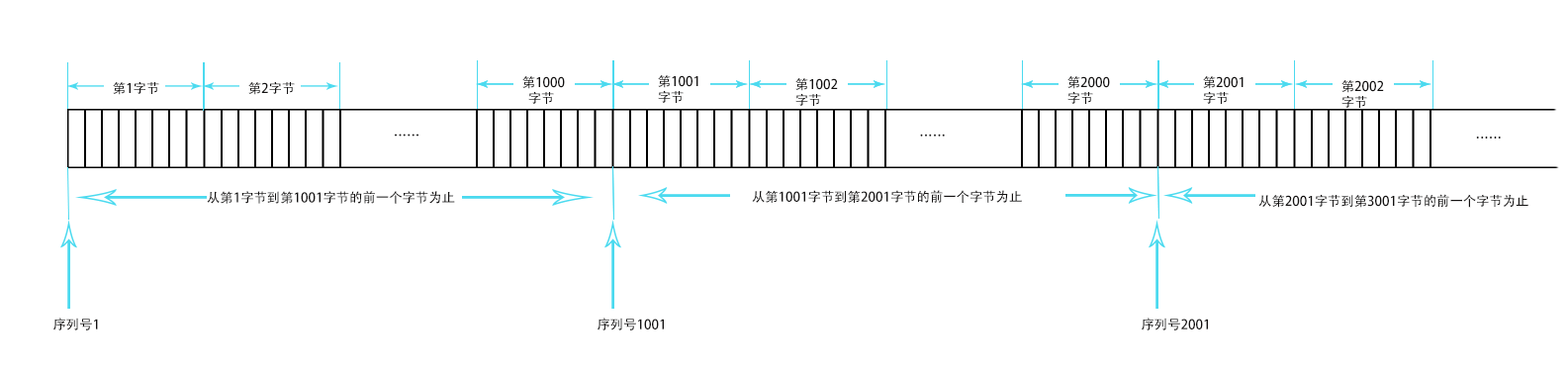
<style>
.page{position:relative;width:1568px;height:373px;background:#ffffff}
.page>*{position:absolute;margin:0}
.t1{font:13.2px "AdobeHeitiStd-Regular";color:#141212}
</style>
<div class="page">
<p class="t1" style="left:522px;top:76px;width:43px;height:28px">第1000<br>  字节</p>
<p class="t1" style="left:658px;top:75px;width:40px;height:28px">第1001<br>字节</p>
<p class="t1" style="left:1067px;top:76px;width:43px;height:28px">第2000<br>字节</p>
<p class="t1" style="left:1203px;top:76px;width:41px;height:28px">第2001<br>字节</p>
<p class="t1" style="left:113px;top:81px;width:46px;height:14px">第1字节</p>
<p class="t1" style="left:248px;top:81px;width:47px;height:14px">第2字节</p>
<p class="t1" style="left:795px;top:78px;width:43px;height:28px">第1002<br>字节</p>
<p class="t1" style="left:1341px;top:80px;width:43px;height:28px">第2002<br>字节</p>
<p class="t1" style="left:395px;top:134px;width:23px;height:3px">……</p>
<p class="t1" style="left:920px;top:134px;width:25px;height:3px">……</p>
<p class="t1" style="left:1476px;top:137px;width:25px;height:1px">……</p>
<p class="t1" style="left:207px;top:191px;width:248px;height:13px">从第1字节到第1001字节的前一个字节为止</p>
<p class="t1" style="left:752px;top:190px;width:270px;height:13px">从第1001字节到第2001字节的前一个字节为止</p>
<p class="t1" style="left:1258px;top:194px;width:270px;height:14px">从第2001字节到第3001字节的前一个字节为止</p>
<p class="t1" style="left:53px;top:318px;width:45px;height:12px">序列号1</p>
<p class="t1" style="left:598px;top:318px;width:66px;height:12px">序列号1001</p>
<p class="t1" style="left:1142px;top:318px;width:66px;height:12px">序列号2001</p>
</div>
